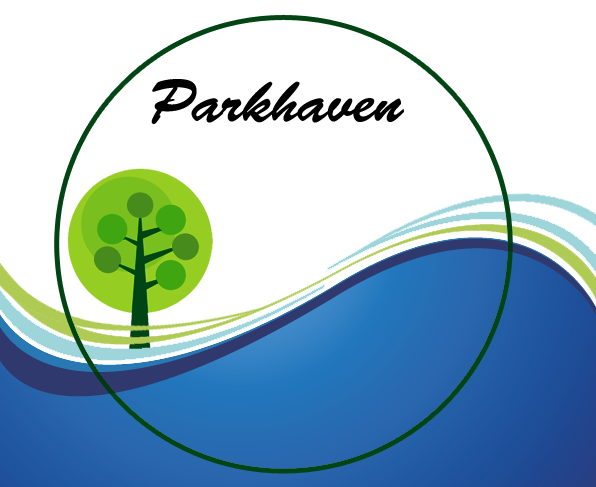
<style>
.page{position:relative;width:596px;height:487px;background:#ffffff}
.page>*{position:absolute;margin:0}
.t1{font:60px "BrushScriptStd";color:#000000}
</style>
<div class="page">
<p class="t1" style="left:151px;top:79px;width:253px;height:45px">Parkhaven</p>
</div>
